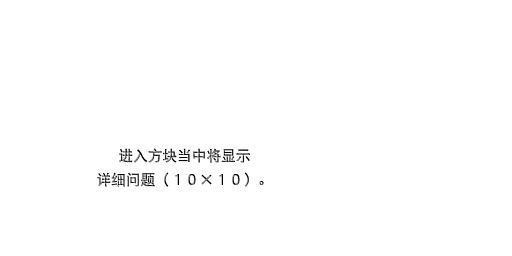
<style>
.page{position:relative;width:512px;height:256px;background:#ffffff}
.page>*{position:absolute;margin:0}
.t1{font:14.7px/24px "DFPHeiW5-GB"}
</style>
<div class="page">
<p class="t1" style="left:97px;top:148px;width:167px;height:39px;text-align:center">进入方块当中将显示<br>详细问题（１０×１０）。</p>
</div>
